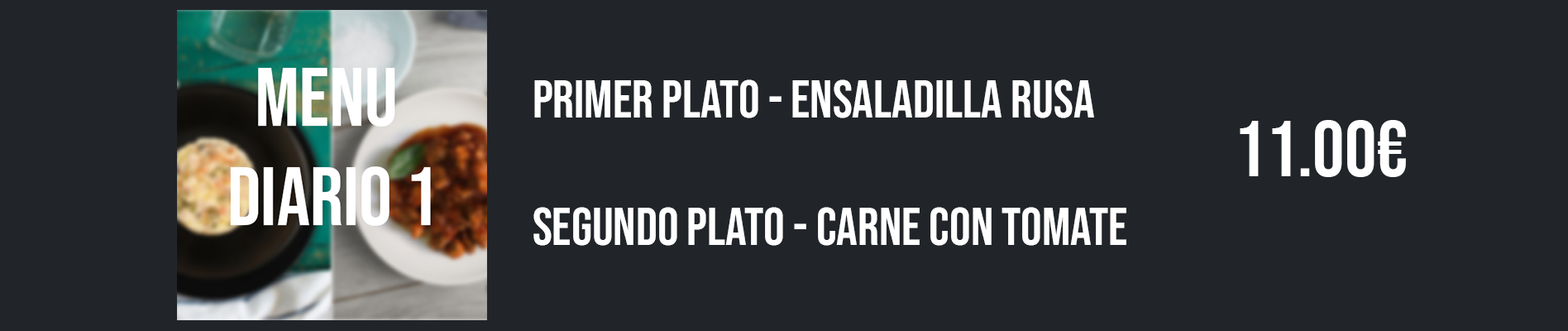
<style>
.page{position:relative;width:1568px;height:331px;background:#212529}
.page>*{position:absolute;margin:0}
.t1{font:52.9px "BebasNeue-Regular";color:#ffffff}
.t2{font:79.4px "BebasNeue-Regular";color:#ffffff}
</style>
<div class="page">
<p class="t1" style="left:533px;top:79px;width:593px;height:167px">Primer plato - Ensaladilla rusa<br><br>Segundo Plato - Carne Con tomate</p>
<p class="t2" style="left:1240px;top:120px;width:166px;height:57px">11.00€</p>
</div>
